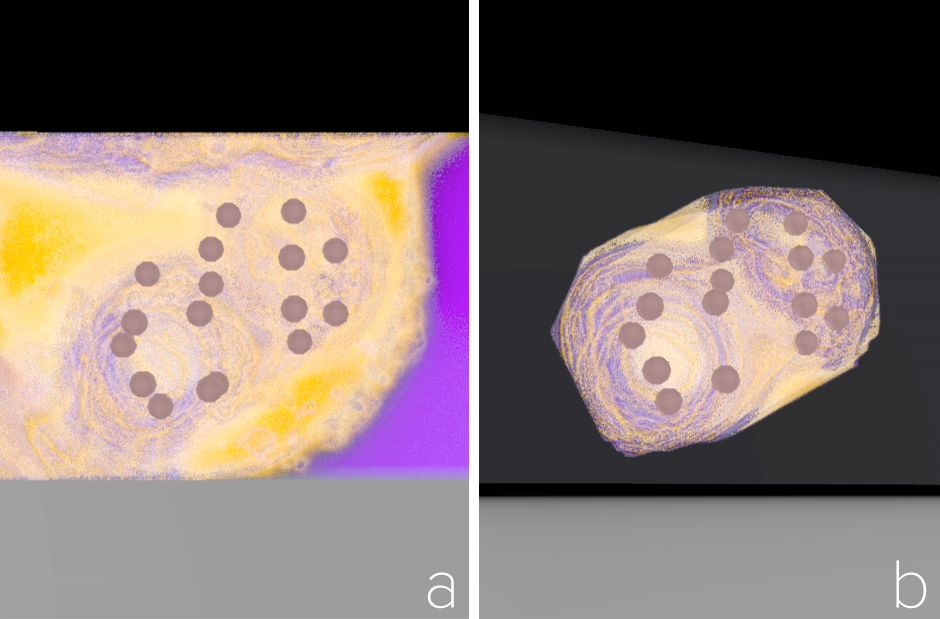
<style>
.page{position:relative;width:940px;height:619px;background:#000000}
.page>*{position:absolute;margin:0}
.t1{font:120px "ProximaNovaT-Thin";color:#fefefe}
</style>
<div class="page">
<p class="t1" style="left:896px;top:560px;width:31px;height:49px">b</p>
<p class="t1" style="left:427px;top:572px;width:27px;height:37px">a</p>
</div>
